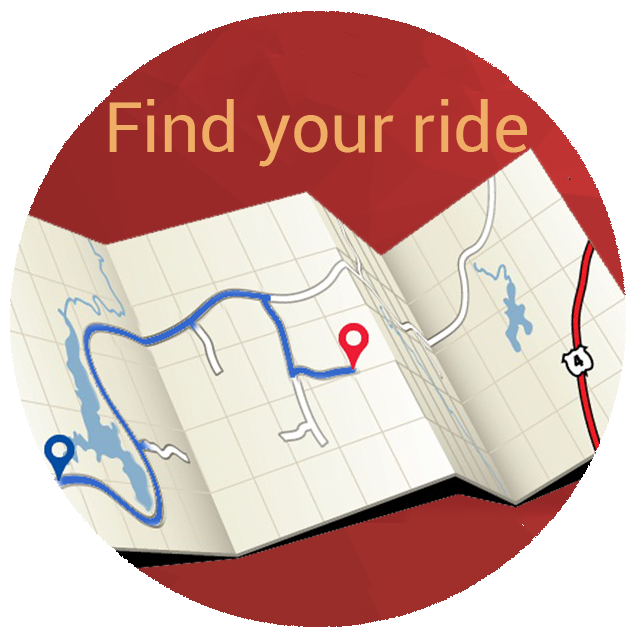
<style>
.page{position:relative;width:637px;height:637px;background:#ffffff}
.page>*{position:absolute;margin:0}
.t1{font:69.2px "Roboto-Regular";color:#f0ad66}
</style>
<div class="page">
<p class="t1" style="left:109px;top:99px;width:418px;height:68px">Find your ride</p>
</div>
